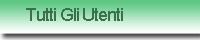
<style>
.page{position:relative;width:200px;height:40px}
.page>*{position:absolute;margin:0}
.t1{font:18px "ArialMT";letter-spacing:-0.06em;color:#3c6f4e}
</style>
<div class="page">
<p class="t1" style="left:26px;top:8px;width:97px;height:13px">Tutti Gli Utenti</p>
</div>
